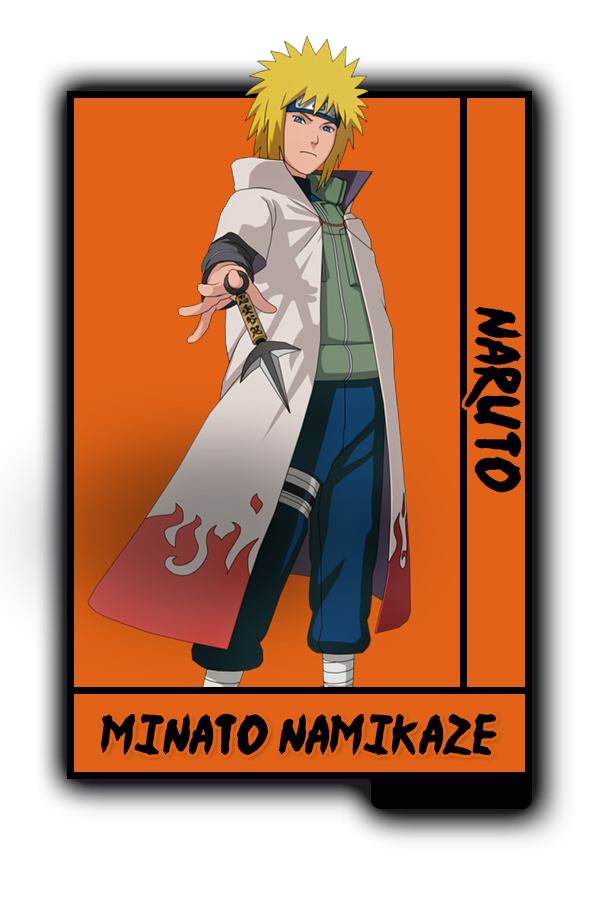
<style>
.page{position:relative;width:600px;height:900px;background:#e26317}
.page>*{position:absolute;margin:0}
.t1{font:52px "Ninja-Naruto";color:#010005}
.t2{font:45.6px "Ninja-Naruto";color:#010005}
</style>
<div class="page">
<p class="t1" style="left:464px;top:307px;width:59px;height:186px;rotate:90deg">Naruto</p>
<p class="t2" style="left:100px;top:713px;width:397px;height:42px">Minato Namikaze</p>
</div>
